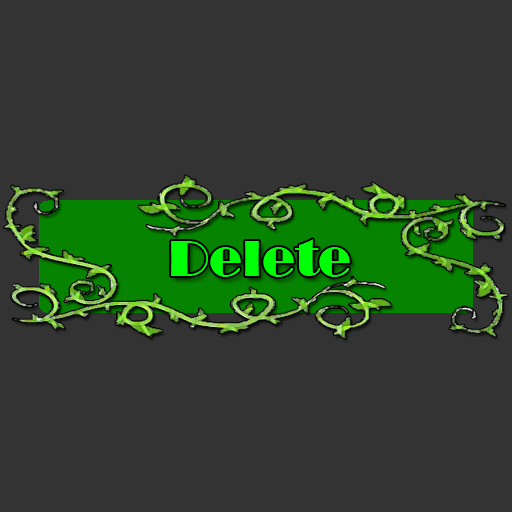
<style>
.page{position:relative;width:512px;height:512px;background:#333333}
.page>*{position:absolute;margin:0}
.t1{font:52.3px "Broadway";color:#00ff06;scale:1.05 1}
</style>
<div class="page">
<p class="t1" style="left:171px;top:239px;width:179px;height:38px">Delete</p>
</div>
